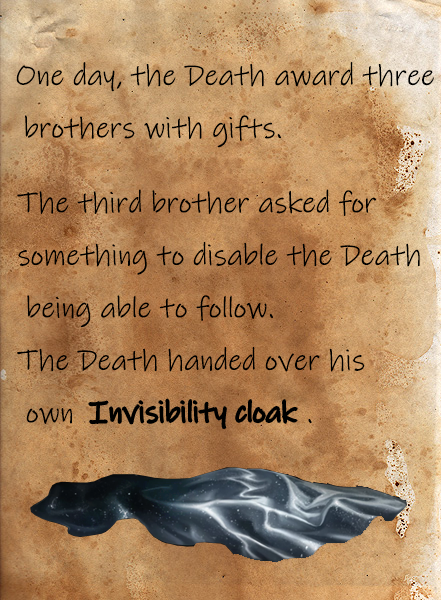
<style>
.page{position:relative;width:441px;height:600px}
.page>*{position:absolute;margin:0}
.t1{font:30px "InkFree";color:#000000}
</style>
<div class="page">
<p class="t1" style="left:16px;top:62px;width:418px;height:86px">One day, the Death award three<br> brothers with gifts.</p>
<p class="t1" style="left:17px;top:189px;width:403px;height:235px">The third brother asked for <br>something to disable the Death<br> being able to follow. <br>The Death handed over his<br> own                           .</p>
</div>
